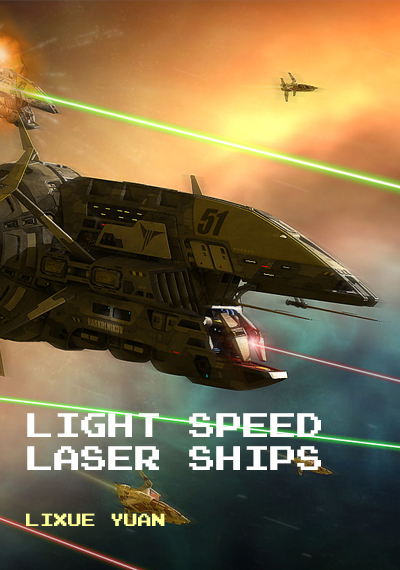
<style>
.page{position:relative;width:400px;height:570px}
.page>*{position:absolute;margin:0}
.t1{font:27px "Emulogic";color:#fefefe}
.t2{font:14px "Emulogic";color:#feff97}
</style>
<div class="page">
<p class="t1" style="left:27px;top:413px;width:294px;height:57px">Light Speed <br>Laser Ships</p>
<p class="t2" style="left:26px;top:513px;width:139px;height:13px">Lixue Yuan</p>
</div>
